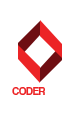
<style>
.page{position:relative;width:80px;height:115px;background:#ffffff}
.page>*{position:absolute;margin:0}
.t1{font:11px "CoolveticaRg-Regular";color:#ec2426}
.t2{font:11px "CoolveticaRg-Regular";color:#ffffff}
</style>
<div class="page">
<p class="t1" style="left:12px;top:87px;width:56px;height:8px">CODER<span class="t2">INDO</span></p>
</div>
